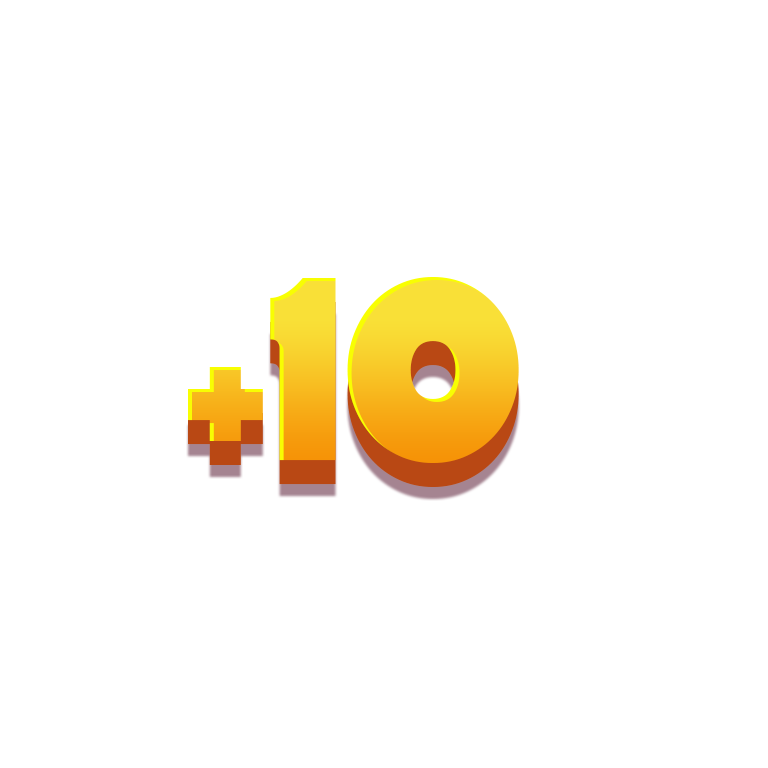
<style>
.page{position:relative;width:768px;height:768px;background:#ffffff}
.page>*{position:absolute;margin:0}
.t1{font:265.9px "Tondu-Beta"}
.t2{font:179.9px "Tondu-Beta"}
</style>
<div class="page">
<p class="t1" style="left:188px;top:277px;width:331px;height:186px"><span class="t2">+</span>10</p>
<p class="t1" style="left:188px;top:301px;width:331px;height:186px"><span class="t2">+</span>10</p>
</div>
